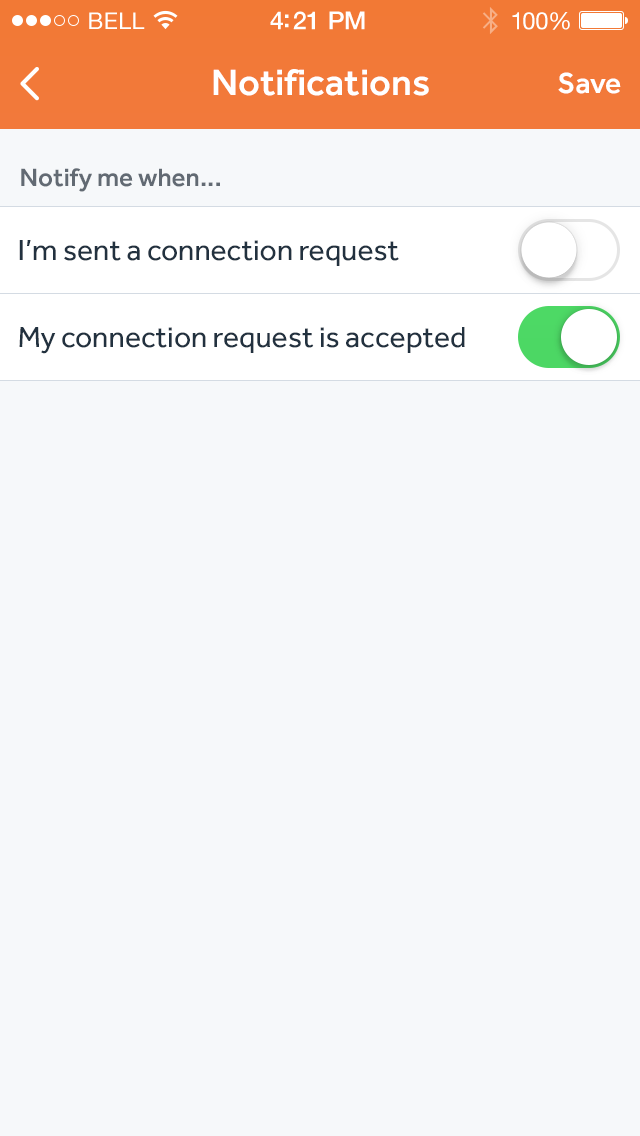
<style>
.page{position:relative;width:640px;height:1136px;background:#f6f8fa}
.page>*{position:absolute;margin:0}
.t1{font:23px "HelveticaNeue";letter-spacing:0.02em;color:#ffffff}
.t2{font:25px "HelveticaNeue-Medium";letter-spacing:-0.02em;color:#ffffff}
.t3{font:24px "HelveticaNeue";letter-spacing:-0.02em;color:#ffffff}
.t4{font:38px "Effra-Medium";color:#ffffff}
.t5{font:30px "Effra-Medium";color:#ffffff}
.t6{font:26px "Effra-Medium";color:#626a73}
.t7{font:30px "Effra-Regular";color:#22313f}
</style>
<div class="page">
<p class="t1" style="left:89px;top:12px;width:56px;height:17px">BELL</p>
<p class="t2" style="left:270px;top:11px;width:95px;height:19px">4:21 PM</p>
<p class="t3" style="left:512px;top:12px;width:58px;height:18px">100%</p>
<p class="t4" style="left:213px;top:69px;width:216px;height:27px">Notifications</p>
<p class="t5" style="left:558px;top:72px;width:63px;height:22px">Save</p>
<p class="t6" style="left:21px;top:168px;width:199px;height:24px">Notify me when...</p>
<p class="t7" style="left:19px;top:240px;width:380px;height:26px">I’m sent a connection request</p>
<p class="t7" style="left:19px;top:327px;width:446px;height:27px">My connection request is accepted</p>
</div>
